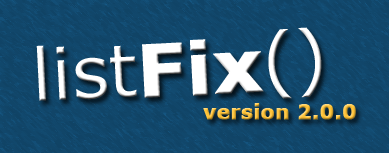
<style>
.page{position:relative;width:389px;height:153px}
.page>*{position:absolute;margin:0}
.t1{font:72px "Verdana";color:#ffffff}
.t2{font:72px "Verdana-Bold";color:#ffffff;font-weight:bold}
.t3{font:20px "Verdana-Bold";font-weight:bold}
</style>
<div class="page">
<p class="t1" style="left:36px;top:27px;width:286px;height:74px;rotate:-3deg">list<span class="t2">Fix</span>()</p>
<p class="t3" style="left:203px;top:103px;width:153px;height:17px">version 2.0.0</p>
</div>
